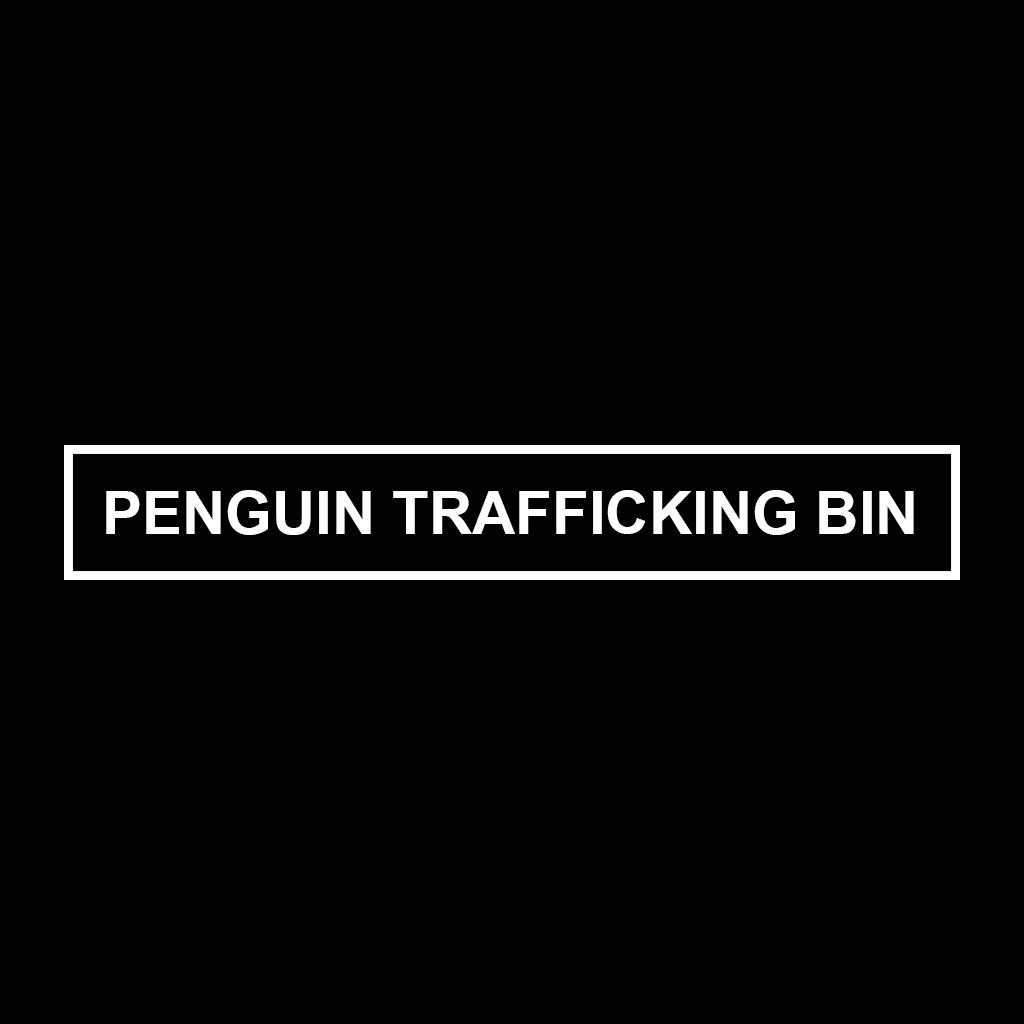
<style>
.page{position:relative;width:1024px;height:1024px;background:#000000}
.page>*{position:absolute;margin:0}
.t1{font:60px "Arial-BoldMT";color:#ffffff}
</style>
<div class="page">
<p class="t1" style="left:106px;top:490px;width:808px;height:45px">PENGUIN TRAFFICKING BIN</p>
</div>
